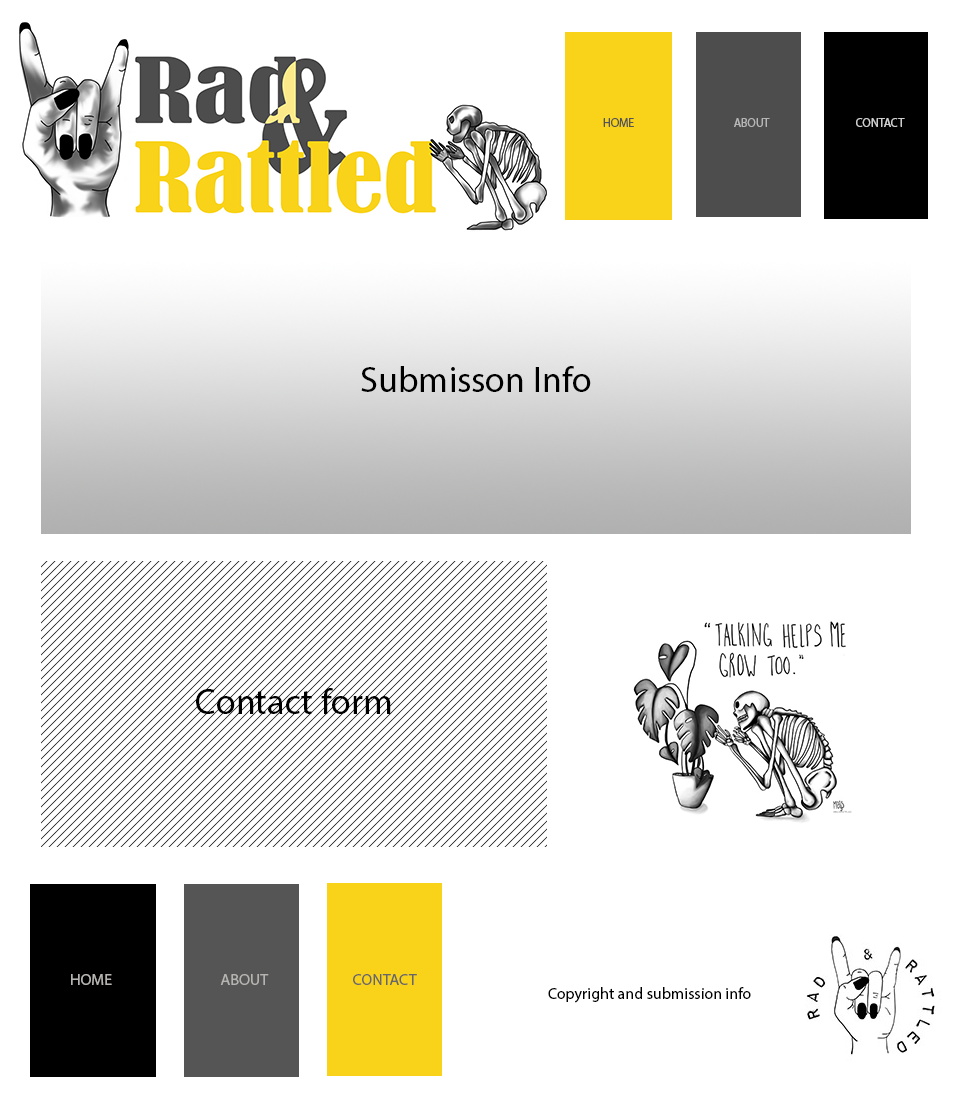
<style>
.page{position:relative;width:960px;height:1093px;background:#ffffff}
.page>*{position:absolute;margin:0}
.t1{font:12px "MyriadPro-Regular";color:#545454}
.t2{font:12px "MyriadPro-Regular";color:#b6b6b6}
.t3{font:12px "MyriadPro-Regular";color:#cdcdcd}
.t4{font:36px "MyriadPro-Regular";color:#000000}
.t5{font:16px "MyriadPro-Regular";color:#b5b4b1}
.t6{font:16px "MyriadPro-Regular";color:#676767}
.t7{font:16px "MyriadPro-Regular";color:#000000}
</style>
<div class="page">
<p class="t1" style="left:603px;top:118px;width:31px;height:9px">HOME</p>
<p class="t2" style="left:734px;top:118px;width:36px;height:9px">ABOUT</p>
<p class="t3" style="left:856px;top:118px;width:49px;height:9px">CONTACT</p>
<p class="t4" style="left:361px;top:366px;width:230px;height:26px">Submisson Info</p>
<p class="t4" style="left:196px;top:688px;width:195px;height:26px">Contact form</p>
<p class="t5" style="left:71px;top:974px;width:41px;height:11px">HOME</p>
<p class="t5" style="left:220px;top:974px;width:49px;height:11px">ABOUT</p>
<p class="t6" style="left:353px;top:974px;width:64px;height:11px">CONTACT</p>
<p class="t7" style="left:548px;top:987px;width:203px;height:16px">Copyright and submission info</p>
</div>
